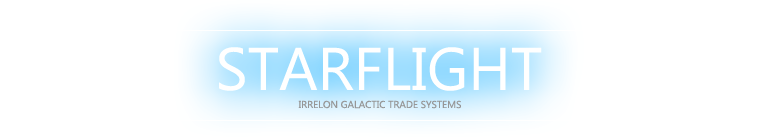
<style>
.page{position:relative;width:760px;height:137px;background:#ffffff}
.page>*{position:absolute;margin:0}
.t1{font:60px "SegoeUI";color:#ffffff}
.t2{font:10px "SegoeUI";color:#969696}
</style>
<div class="page">
<p class="t1" style="left:219px;top:47px;width:323px;height:44px">STARFLIGHT</p>
<p class="t2" style="left:298px;top:100px;width:163px;height:9px">IRRELON GALACTIC TRADE SYSTEMS</p>
</div>
